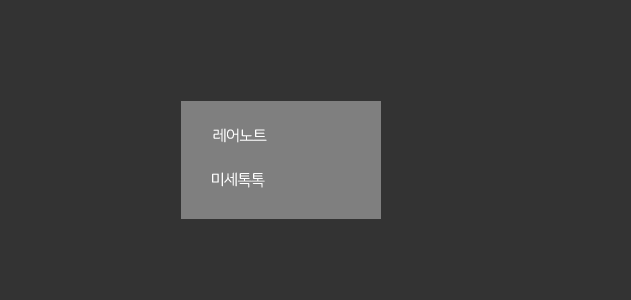
<style>
.page{position:relative;width:631px;height:300px;background:#333333}
.page>*{position:absolute;margin:0}
.t1{font:16px "NanumSquareRoundOTFR";letter-spacing:-0.075em;color:#ffffff}
</style>
<div class="page">
<p class="t1" style="left:213px;top:128px;width:54px;height:15px">레어노트</p>
<p class="t1" style="left:212px;top:172px;width:53px;height:16px">미세톡톡</p>
</div>
